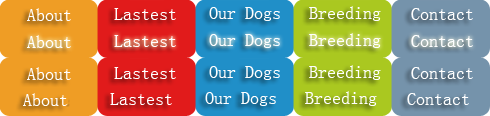
<style>
.page{position:relative;width:490px;height:116px}
.page>*{position:absolute;margin:0}
.t1{font:18px "SimSun";color:#ffffff}
</style>
<div class="page">
<p class="t1" style="left:309px;top:6px;width:72px;height:15px">Breeding</p>
<p class="t1" style="left:27px;top:8px;width:44px;height:13px">About</p>
<p class="t1" style="left:114px;top:8px;width:62px;height:12px">Lastest</p>
<p class="t1" style="left:209px;top:7px;width:71px;height:14px">Our Dogs</p>
<p class="t1" style="left:411px;top:8px;width:62px;height:12px">Contact</p>
<p class="t1" style="left:27px;top:35px;width:44px;height:13px">About</p>
<p class="t1" style="left:114px;top:35px;width:62px;height:12px">Lastest</p>
<p class="t1" style="left:209px;top:34px;width:71px;height:14px">Our Dogs</p>
<p class="t1" style="left:309px;top:33px;width:72px;height:15px">Breeding</p>
<p class="t1" style="left:411px;top:35px;width:62px;height:12px">Contact</p>
<p class="t1" style="left:309px;top:65px;width:72px;height:15px">Breeding</p>
<p class="t1" style="left:27px;top:67px;width:44px;height:13px">About</p>
<p class="t1" style="left:114px;top:67px;width:62px;height:12px">Lastest</p>
<p class="t1" style="left:209px;top:66px;width:71px;height:14px">Our Dogs</p>
<p class="t1" style="left:411px;top:67px;width:62px;height:12px">Contact</p>
<p class="t1" style="left:23px;top:93px;width:44px;height:13px">About</p>
<p class="t1" style="left:110px;top:93px;width:62px;height:12px">Lastest</p>
<p class="t1" style="left:205px;top:92px;width:71px;height:14px">Our Dogs</p>
<p class="t1" style="left:305px;top:91px;width:72px;height:15px">Breeding</p>
<p class="t1" style="left:407px;top:93px;width:62px;height:12px">Contact</p>
</div>
